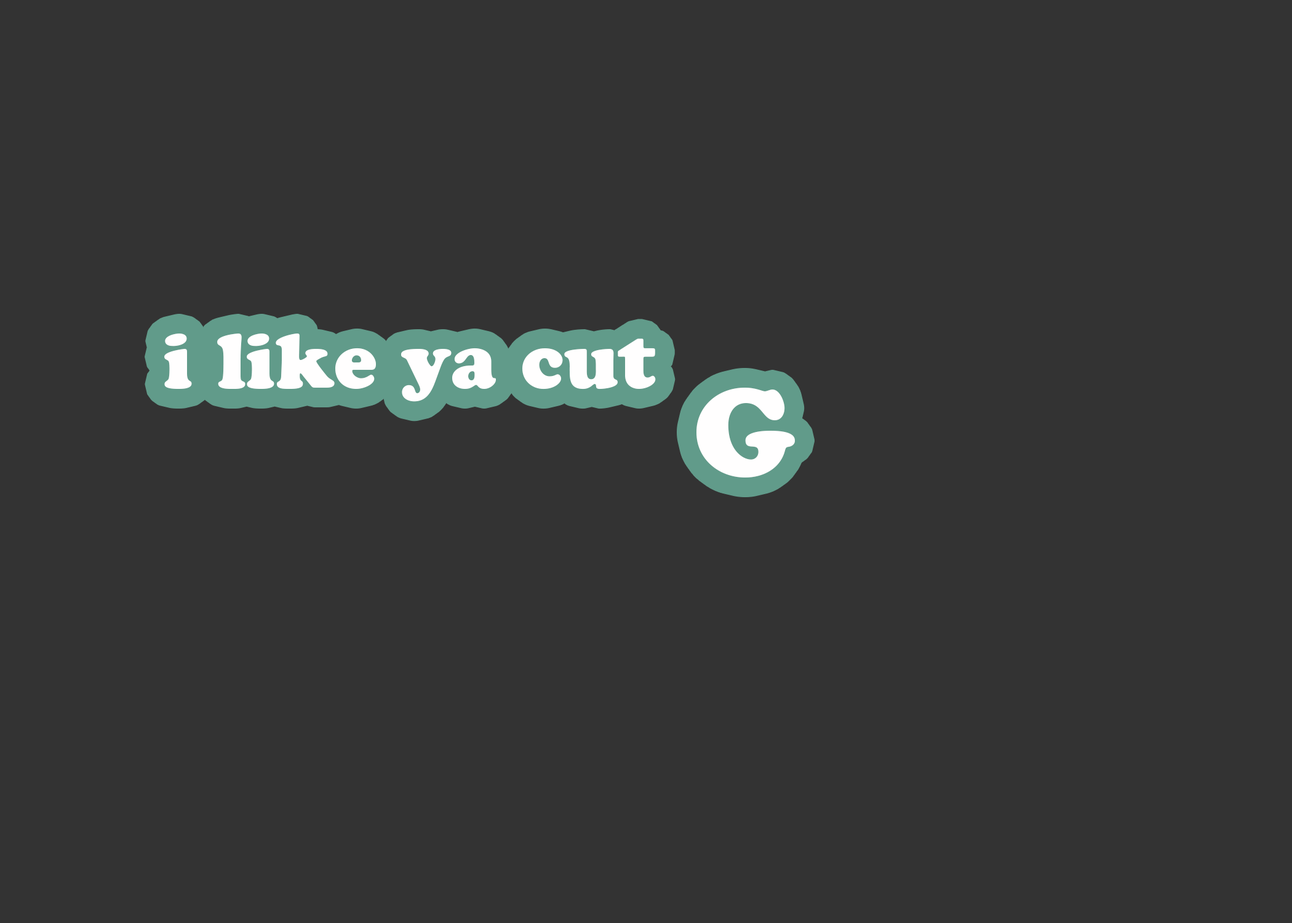
<style>
.page{position:relative;width:1292px;height:923px;background:#333333}
.page>*{position:absolute;margin:0}
.t1{font:76.9px "CooperBlackStd";color:#fffefe}
.t2{font:123.1px "CooperBlackStd";color:#fffefe}
</style>
<div class="page">
<p class="t1" style="left:164px;top:333px;width:492px;height:69px">i like ya cut</p>
<p class="t2" style="left:696px;top:388px;width:99px;height:89px">G</p>
</div>
